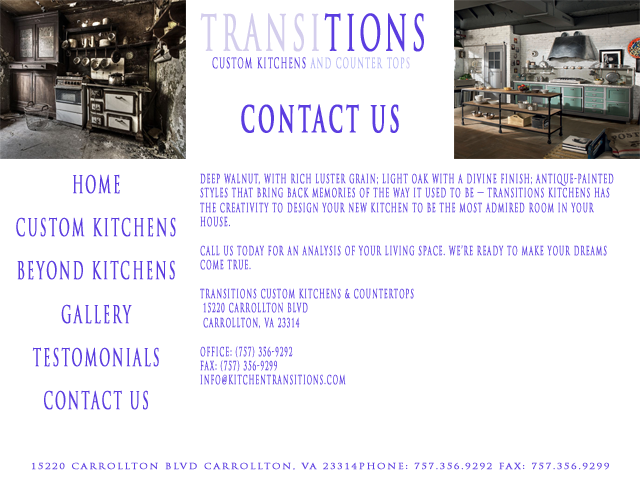
<style>
.page{position:relative;width:640px;height:480px;background:#ffffff}
.page>*{position:absolute;margin:0}
.t1{font:48px "TrajanPro-Regular";letter-spacing:0.15em;color:#d4ceed;text-transform:uppercase;font-weight:bold;scale:0.5 1}
.t2{font:48px "TrajanPro-Regular";letter-spacing:0.15em;color:#5b3de0;text-transform:uppercase;font-weight:bold;scale:0.5 1}
.t3{font:14px "TrajanPro-Regular";letter-spacing:0.15em;color:#5b3de0;text-transform:uppercase;font-weight:bold;scale:0.5 1}
.t4{font:14px "TrajanPro-Regular";letter-spacing:0.15em;color:#b2b4f4;text-transform:uppercase;font-weight:bold;scale:0.5 1}
.t5{font:14px "TrajanPro-Regular";letter-spacing:0.15em;color:#ccc3f2;text-transform:uppercase;font-weight:bold;scale:0.5 1}
.t6{font:36px "TrajanPro-Bold";letter-spacing:0.15em;color:#5b3de0;text-transform:uppercase;font-weight:bold;scale:0.5 1}
.t7{font:24px "TrajanPro-Regular";letter-spacing:0.15em;color:#5b3de0;text-transform:uppercase;font-weight:bold;scale:0.5 1}
.t8{font:12px "TrajanPro-Regular";letter-spacing:0.15em;color:#5b3de0;text-transform:uppercase;font-weight:bold;scale:0.5 1}
.t9{font:8px "TrajanPro-Regular";letter-spacing:0.15em;color:#5b3de0;text-transform:uppercase;font-weight:bold;scale:1.19 1}
</style>
<div class="page">
<p class="t1" style="left:200px;top:13px;width:224px;height:39px">Transi<span class="t2">tions</span></p>
<p class="t3" style="left:212px;top:57px;width:198px;height:12px">Custom Kitchens <span class="t4">and Counter Top</span><span class="t5">s</span></p>
<p class="t6" style="left:241px;top:104px;width:158px;height:29px">Contact Us</p>
<p class="t7" style="left:16px;top:174px;width:160px;height:236px;text-align:center">HOme<br><br>Custom Kitchens<br><br>Beyond Kitchens<br><br>Gallery<br><br>Testomonials<br><br>Contact Us</p>
<p class="t8" style="left:200px;top:173px;width:414px;height:212px">Deep walnut, with rich luster grain; Light Oak with a divine finish; Antique-Painted styles that bring back memories of the way it used to be — Transitions Kitchens has the creativity to design your new kitchen to be the most admired room in your house.<br><br>Call us today for an analysis of your living space. We’re ready to make your dreams come true.<br><br>Transitions Custom Kitchens &amp; Countertops<br> 15220 Carrollton Blvd<br> Carrollton, VA 23314<br><br>office: (757) 356-9292 <br>fax: (757) 356-9299 <br>info@kitchentransitions.com</p>
<p class="t9" style="left:32px;top:462px;width:577px;height:8px">15220 Carrollton Blvd Carrollton, VA 23314Phone: 757.356.9292 Fax: 757.356.9299</p>
</div>
